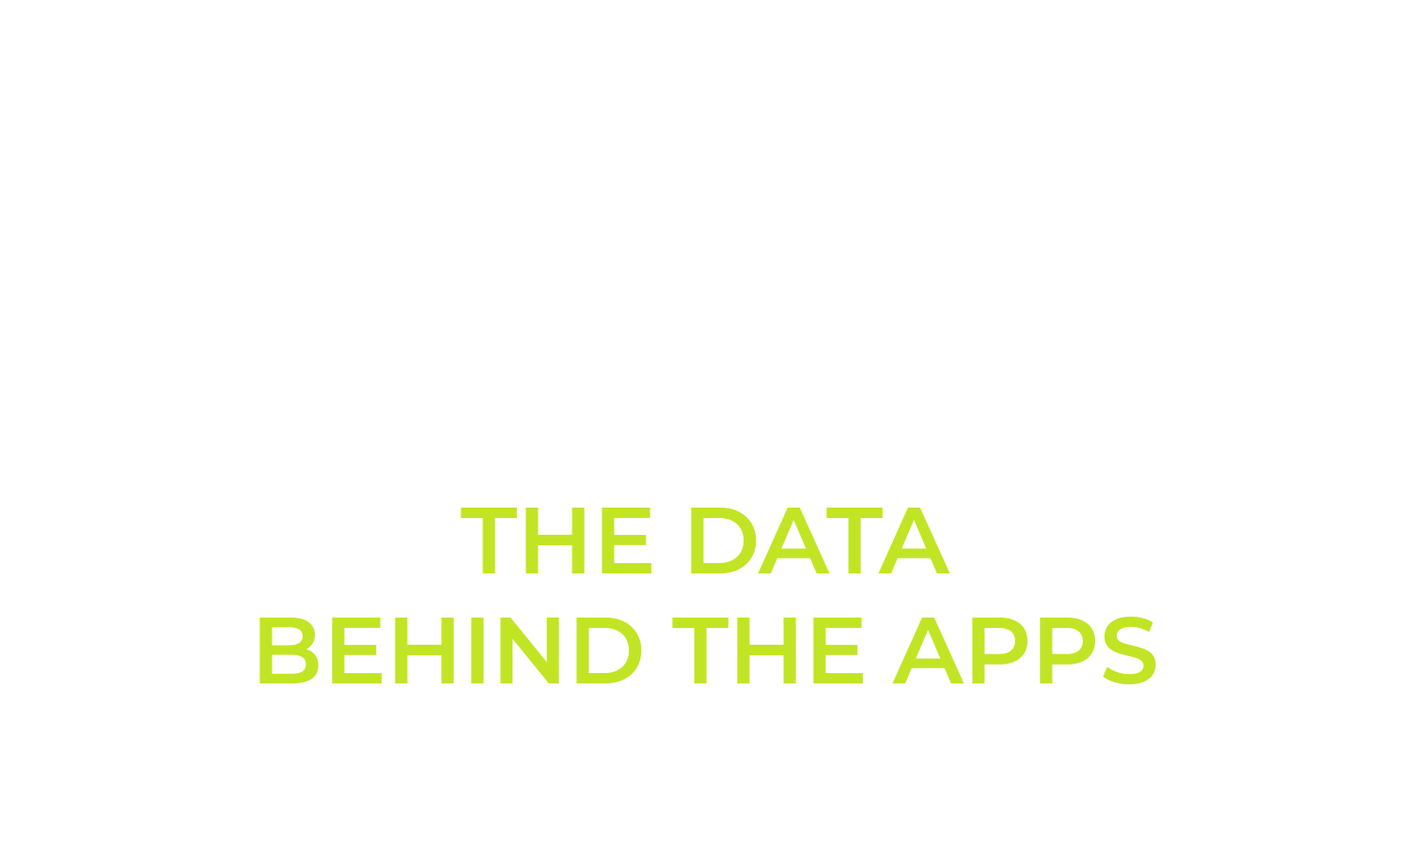
<style>
.page{position:relative;width:1410px;height:846px;background:#ffffff}
.page>*{position:absolute;margin:0}
.t1{font:94px/0.2px "Montserrat-SemiBold";color:#c1e524;text-transform:uppercase}
</style>
<div class="page">
<p class="t1" style="left:259px;top:508px;width:897px;height:176px;text-align:center">The data<br>behind the apps</p>
</div>
